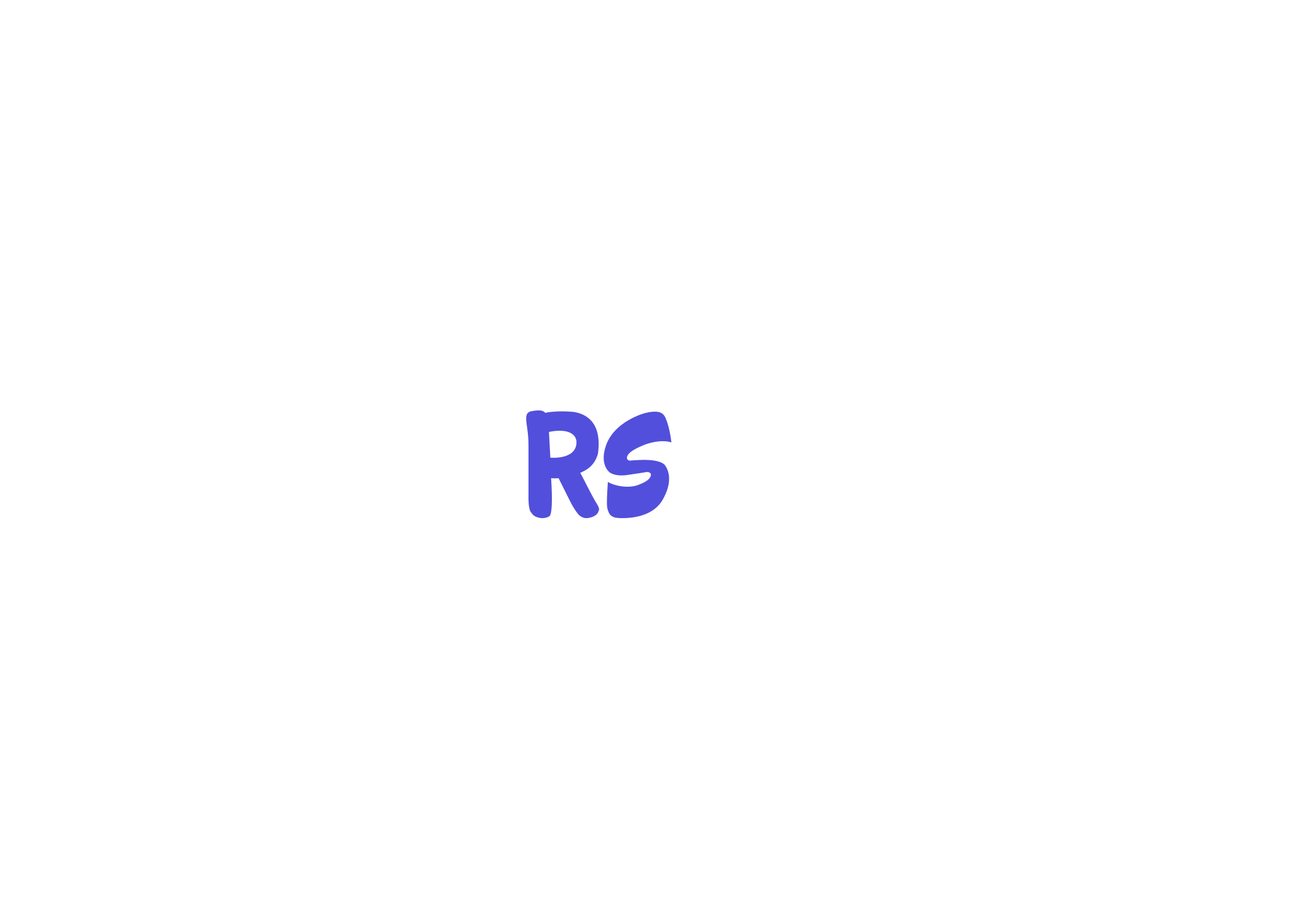
<style>
.page{position:relative;width:1292px;height:923px;background:#ffffff}
.page>*{position:absolute;margin:0}
.t1{font:153.8px "Cartwheel";color:#524fdc}
</style>
<div class="page">
<p class="t1" style="left:526px;top:410px;width:146px;height:108px">RS</p>
</div>
